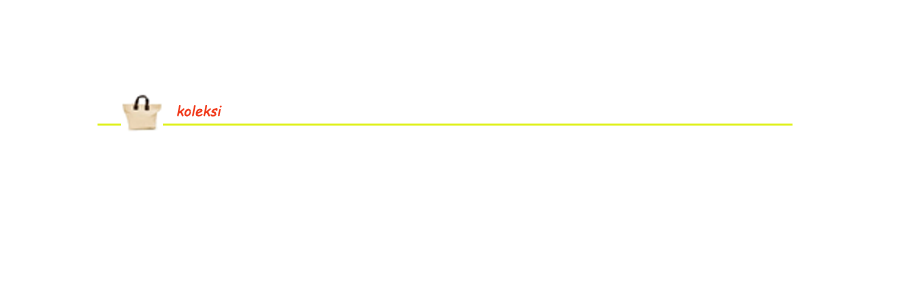
<style>
.page{position:relative;width:900px;height:300px;background:#ffffff}
.page>*{position:absolute;margin:0}
.t1{font:14px "ComicSansMS";color:#f03617;font-style:italic}
</style>
<div class="page">
<p class="t1" style="left:177px;top:105px;width:45px;height:12px">koleksi</p>
</div>
